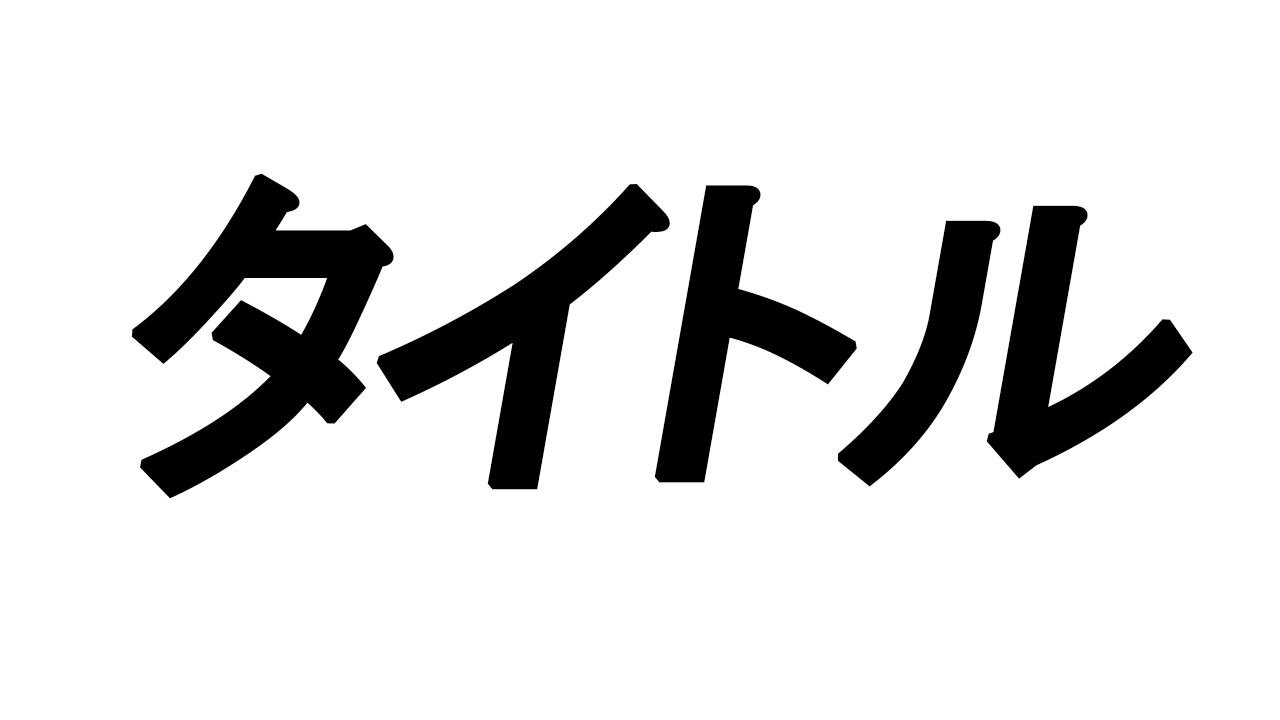
<style>
.page{position:relative;width:1280px;height:720px;background:#ffffff}
.page>*{position:absolute;margin:0}
.t1{font:349.2px "HGPGothicE";letter-spacing:-0.07em;color:#000000;font-weight:bold;font-style:italic}
</style>
<div class="page">
<p class="t1" style="left:131px;top:173px;width:1062px;height:326px">タイトル</p>
</div>
